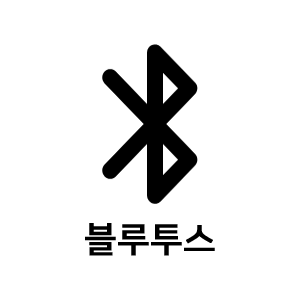
<style>
.page{position:relative;width:300px;height:300px;background:#ffffff}
.page>*{position:absolute;margin:0}
.t1{font:35px "NanumSquareB";color:#000000;font-weight:bold}
</style>
<div class="page">
<p class="t1" style="left:85px;top:223px;width:130px;height:33px">블루투스</p>
</div>
